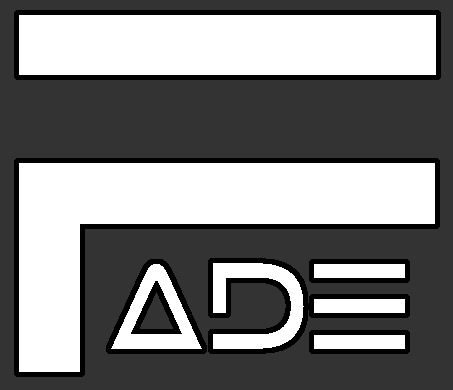
<style>
.page{position:relative;width:453px;height:390px;background:#333333}
.page>*{position:absolute;margin:0}
.t1{font:460px "Tele-Marines";letter-spacing:0.01em;color:#ffffff}
.t2{font:110px "Tele-Marines";letter-spacing:0.01em;color:#ffffff;scale:0.91 1}
</style>
<div class="page">
<p class="t1" style="left:19px;top:15px;width:417px;height:357px">F</p>
<p class="t2" style="left:111px;top:263px;width:294px;height:86px">ade</p>
</div>
